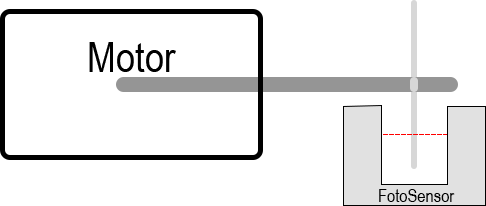
<style>
.page{position:relative;width:486px;height:206px;background:#ffffff}
.page>*{position:absolute;margin:0}
.t1{font:42px "ArialNarrow";color:#000000}
.t2{font:18px "ArialNarrow";color:#000000}
</style>
<div class="page">
<p class="t1" style="left:89px;top:42px;width:87px;height:30px"><span class="t2"><br></span>Motor</p>
<p class="t2" style="left:379px;top:189px;width:76px;height:13px">FotoSensor</p>
</div>
